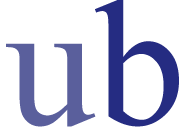
<style>
.page{position:relative;width:191px;height:135px;background:#ffffff}
.page>*{position:absolute;margin:0}
.t1{font:179.2px "TimesNewRomanPSMT";color:#5a5f9c}
.t2{font:179.2px "TimesNewRomanPSMT";color:#252c82}
</style>
<div class="page">
<p class="t1" style="left:6px;top:0px;width:173px;height:127px">u<span class="t2">b</span></p>
</div>
